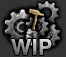
<style>
.page{position:relative;width:66px;height:57px;background:#333333}
.page>*{position:absolute;margin:0}
.t1{font:22px "Helvetica-Bold"}
</style>
<div class="page">
<p class="t1" style="left:11px;top:39px;width:41px;height:16px">WIP</p>
</div>
